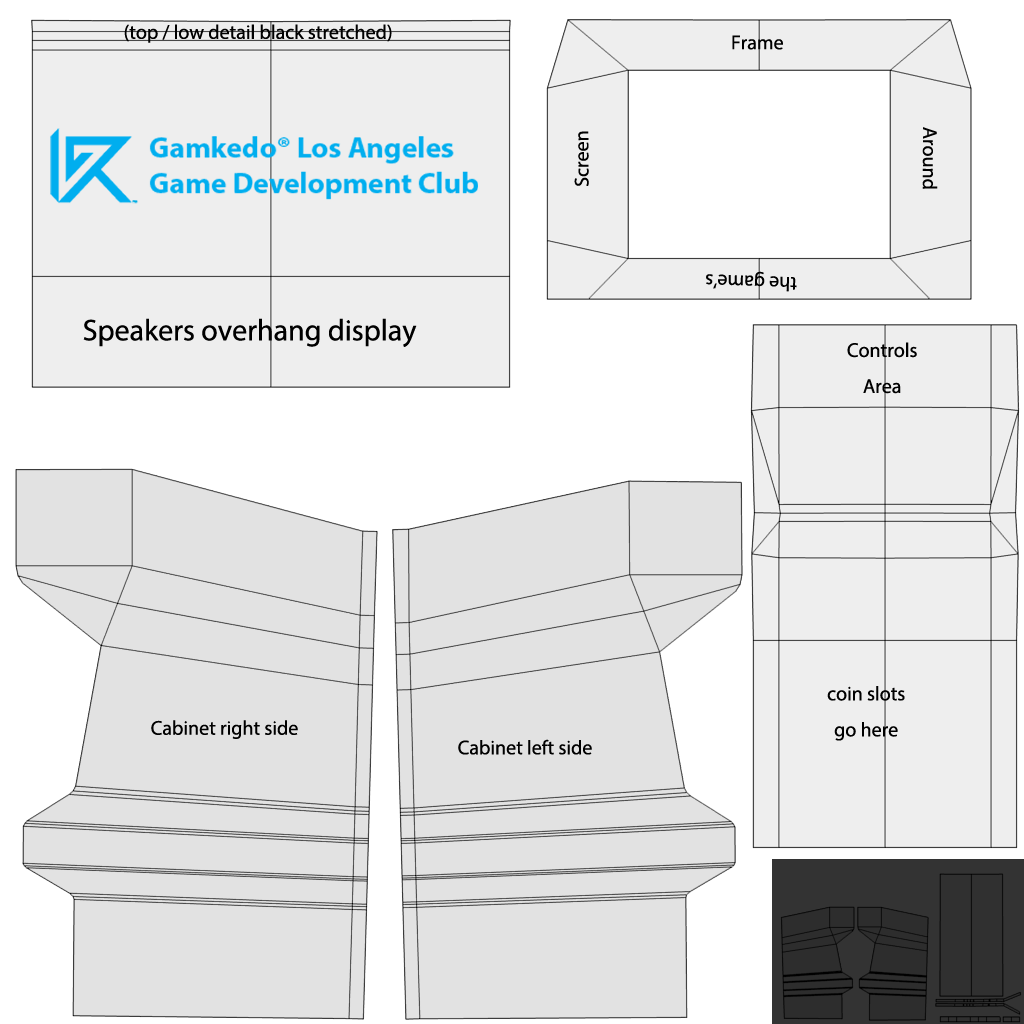
<style>
.page{position:relative;width:1024px;height:1024px;background:#eeeeee}
.page>*{position:absolute;margin:0}
.t1{font:20px "MyriadPro-Regular";color:#000000}
.t2{font:30px "MyriadPro-Regular";color:#000000}
.t3{font:20px/36px "MyriadPro-Regular";color:#000000}
</style>
<div class="page">
<p class="t1" style="left:124px;top:24px;width:268px;height:19px">(top / low detail black stretched)</p>
<p class="t1" style="left:732px;top:35px;width:51px;height:15px">Frame</p>
<p class="t1" style="left:574px;top:131px;width:15px;height:55px;rotate:-90deg">Screen</p>
<p class="t1" style="left:922px;top:127px;width:16px;height:62px;rotate:90deg">Around</p>
<p class="t1" style="left:706px;top:271px;width:91px;height:21px;rotate:-178deg">the game’s</p>
<p class="t2" style="left:83px;top:318px;width:334px;height:29px">Speakers overhang display</p>
<p class="t3" style="left:847px;top:342px;width:70px;height:52px;text-align:center">Controls<br>Area</p>
<p class="t3" style="left:827px;top:686px;width:78px;height:55px;text-align:center">coin slots<br>go here</p>
<p class="t1" style="left:151px;top:720px;width:147px;height:19px">Cabinet right side</p>
<p class="t1" style="left:458px;top:739px;width:134px;height:16px">Cabinet left side</p>
</div>
